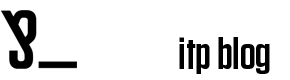
<style>
.page{position:relative;width:290px;height:80px;background:#ffffff}
.page>*{position:absolute;margin:0}
.t1{font:45px "Tungsten-Semibold";color:#000000}
</style>
<div class="page">
<p class="t1" style="left:158px;top:37px;width:112px;height:37px">_itp blog</p>
</div>
